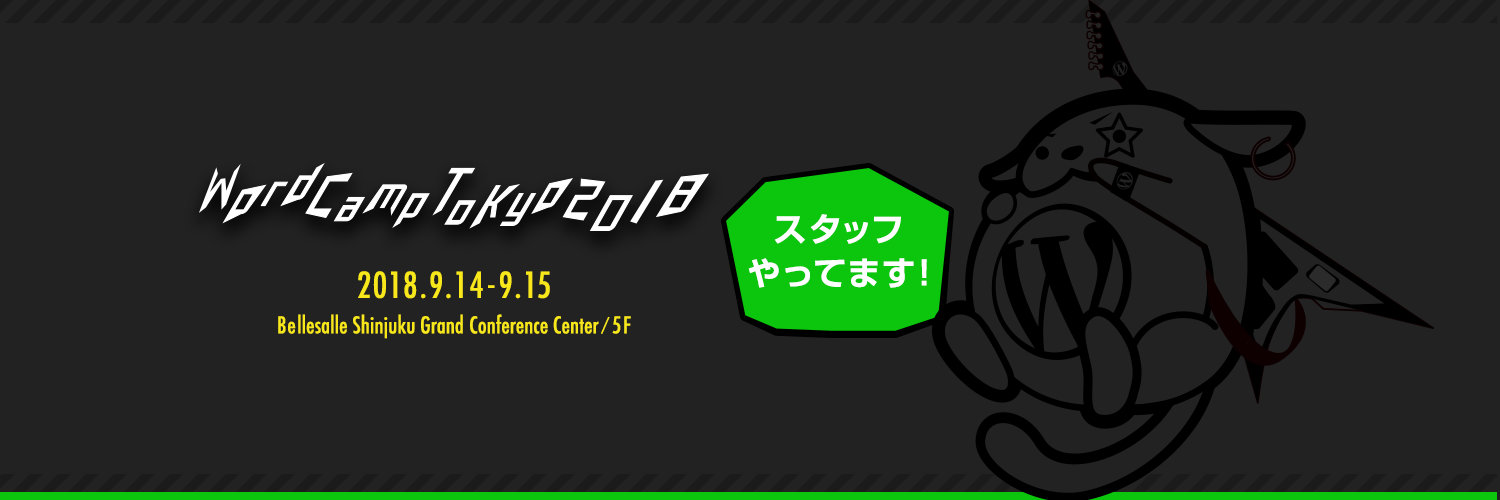
<style>
.page{position:relative;width:1500px;height:500px;background:#222222}
.page>*{position:absolute;margin:0}
.t1{font:33px/43.8px "ShinGoPr6N-DeBold";color:#ffffff}
.t2{font:22.6px/35.2px "Futura-CondensedMedium";color:#f7e71b}
.t3{font:34.8px/46.2px "Futura-CondensedMedium";color:#f7e71b}
.t4{font:22.6px/20.1px "Futura-CondensedMedium";color:#f7e71b}
.t5{font:15.8px/20.1px "Futura-CondensedMedium";color:#f7e71b}
</style>
<div class="page">
<p class="t1" style="left:748px;top:214px;width:179px;height:74px;text-align:center">スタッフ<br>やってます!</p>
<p class="t2" style="left:278px;top:271px;width:353px;height:68px;text-align:center"><span class="t3">2018.9.14-9.15<br></span>Bellesalle Shinjuku Grand <span class="t4">Conference Center</span><span class="t5">/</span><span class="t4">5F</span></p>
</div>
